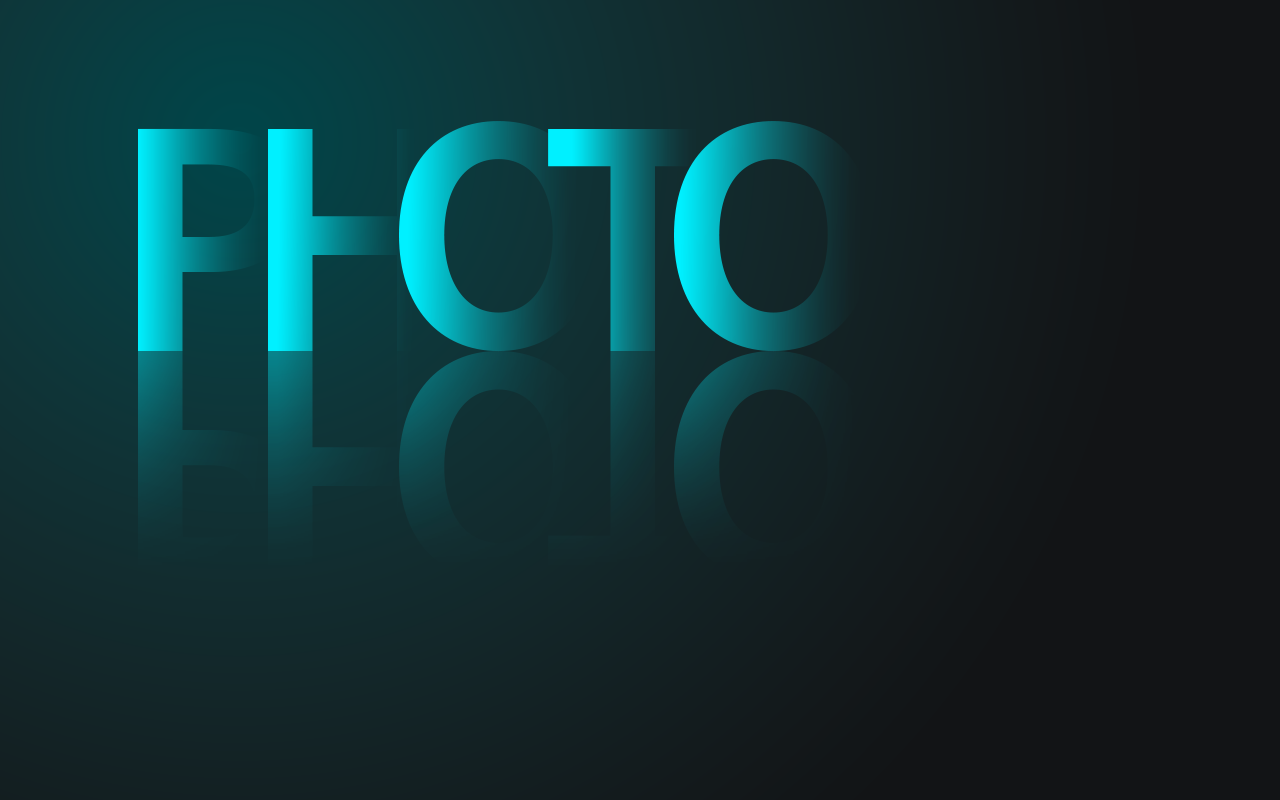
<style>
.page{position:relative;width:1280px;height:800px}
.page>*{position:absolute;margin:0}
.t1{font:300px "NotoSansKR-Bold"}
.t2{font:300.5px "NotoSansKR-Bold";color:#0f3d41}
.t3{font:300.5px "NotoSansKR-Bold";color:#113133}
.t4{font:300.5px "NotoSansKR-Bold";color:#132528}
</style>
<div class="page">
<p class="t1" style="left:399px;top:121px;width:199px;height:231px">O</p>
<p class="t1" style="left:674px;top:121px;width:199px;height:231px">O</p>
<p class="t1" style="left:138px;top:128px;width:160px;height:223px">P</p>
<p class="t1" style="left:268px;top:129px;width:173px;height:222px">H</p>
<p class="t2" style="left:268px;top:351px;width:173px;height:222px">H</p>
<p class="t3" style="left:399px;top:350px;width:199px;height:232px">O</p>
<p class="t4" style="left:674px;top:350px;width:199px;height:232px">O</p>
</div>
